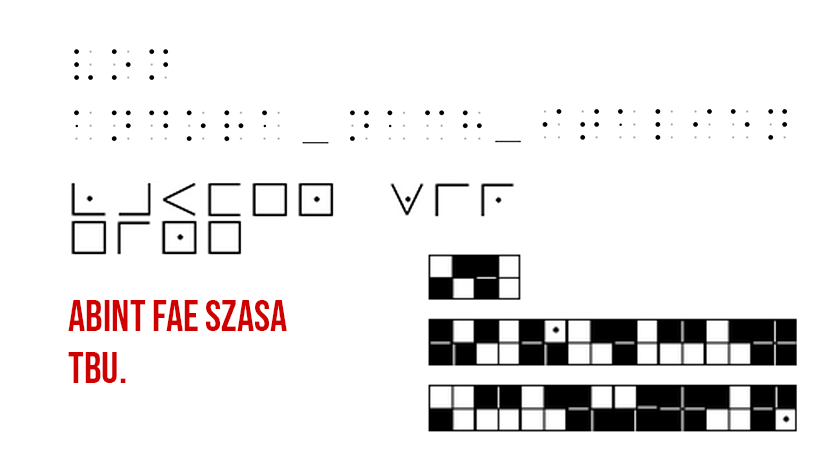
<style>
.page{position:relative;width:827px;height:465px;background:#ffffff}
.page>*{position:absolute;margin:0}
.t1{font:43.1px "BebasNeue-Regular";color:#d10000}
</style>
<div class="page">
<p class="t1" style="left:68px;top:300px;width:219px;height:83px">ABINT FAE SZASA<br>TBU.</p>
</div>
